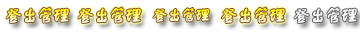
<style>
.page{position:relative;width:360px;height:32px;background:#ffffff}
.page>*{position:absolute;margin:0}
.t1{font:18px "FZSTK--GBK1-0";letter-spacing:-0.14em;font-weight:bold}
.t2{font:16px "FZSTK--GBK1-0";letter-spacing:-0.14em;font-weight:bold}
.t3{font:18px "FZSTK--GBK1-0";letter-spacing:-0.14em;color:#f1f1f1;font-weight:bold}
</style>
<div class="page">
<p class="t1" style="left:6px;top:7px;width:63px;height:16px">登出管理</p>
<p class="t1" style="left:78px;top:7px;width:63px;height:16px">登出管理</p>
<p class="t2" style="left:153px;top:8px;width:57px;height:14px">登出管理</p>
<p class="t1" style="left:221px;top:7px;width:64px;height:16px">登出管理</p>
<p class="t3" style="left:294px;top:7px;width:63px;height:16px">登出管理</p>
</div>
